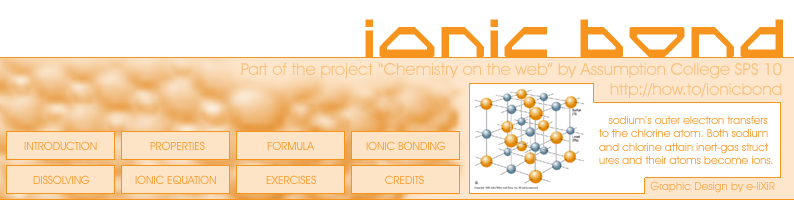
<style>
.page{position:relative;width:794px;height:200px;background:#ffffff}
.page>*{position:absolute;margin:0}
.t1{font:50px "SpyLord";color:#f7941d}
.t2{font:16.7px "AvantGardeITCbyBT-Book";color:#fabf78}
.t3{font:11.1px "AvantGardeITCbyBT-Book";color:#f7941d}
.t4{font:11.1px "AvantGardeITCbyBT-Book"}
.t5{font:11.1px "AvantGardeITCbyBT-Book";color:#f8a440}
</style>
<div class="page">
<p class="t1" style="left:365px;top:19px;width:418px;height:38px">IONIC bond</p>
<p class="t2" style="left:241px;top:63px;width:541px;height:35px;text-align:right">Part of the project “Chemistry on the web” by Assumption College SPS 10<br>http://how.to/ionicbond</p>
<p class="t3" style="left:599px;top:116px;width:174px;height:48px">sodium’s outer electron transfers <br>to the chlorine atom. Both sodium <br>and chlorine attain inert-gas struct<br>ures and their atoms become ions.</p>
<p class="t3" style="left:24px;top:141px;width:73px;height:9px">INTRODUCTION</p>
<p class="t3" style="left:150px;top:141px;width:55px;height:9px">PROPERTIES</p>
<p class="t3" style="left:267px;top:141px;width:47px;height:9px">FORMULA</p>
<p class="t3" style="left:366px;top:141px;width:80px;height:9px">IONIC BONDING</p>
<p class="t4" style="left:33px;top:175px;width:57px;height:9px">DISSOLVING</p>
<p class="t3" style="left:135px;top:175px;width:81px;height:9px">IONIC EQUATION</p>
<p class="t4" style="left:266px;top:175px;width:50px;height:9px">EXERCISES</p>
<p class="t3" style="left:385px;top:175px;width:39px;height:9px">CREDITS</p>
<p class="t5" style="left:650px;top:181px;width:125px;height:12px">Graphic Design by e-liXiR</p>
</div>
